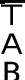
<style>
.page{position:relative;width:25px;height:80px;background:#ffffff}
.page>*{position:absolute;margin:0}
.t1{font:30.8px/29.2px "SimHei";scale:1.15 1}
</style>
<div class="page">
<p class="t1" style="left:1px;top:1px;width:22px;height:79px;text-align:center">Ｔ<br>Ａ<br>B</p>
</div>
